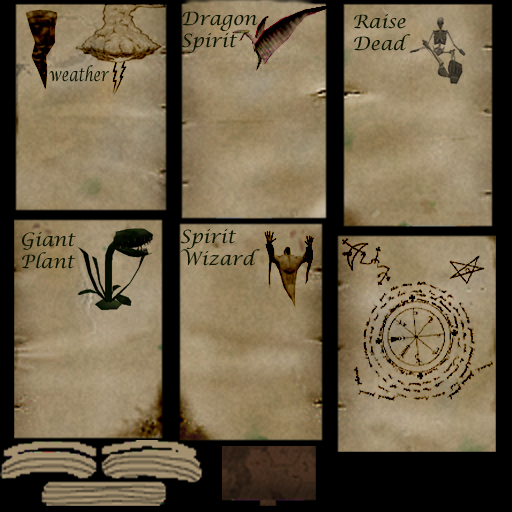
<style>
.page{position:relative;width:512px;height:512px;background:#000000}
.page>*{position:absolute;margin:0}
.t1{font:18.4px "LucidaCalligraphy-Italic";color:#0a1400}
.t2{font:18.4px "LucidaCalligraphy-Italic";color:#0a1400;scale:0.74 1}
</style>
<div class="page">
<p class="t1" style="left:181px;top:11px;width:77px;height:42px">Dragon<br>Spirit</p>
<p class="t1" style="left:354px;top:13px;width:57px;height:38px">Raise<br>Dead</p>
<p class="t2" style="left:49px;top:65px;width:60px;height:17px">weather</p>
<p class="t1" style="left:22px;top:231px;width:54px;height:38px">Giant<br>Plant</p>
<p class="t1" style="left:180px;top:228px;width:80px;height:38px">Spirit<br>Wizard</p>
</div>
